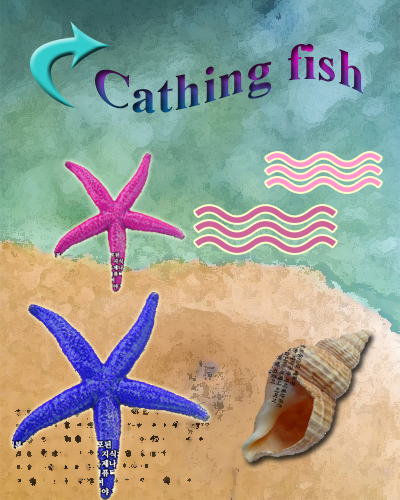
<style>
.page{position:relative;width:400px;height:500px}
.page>*{position:absolute;margin:0}
.t1{font:52.1px "TimesNewRomanPS-BoldMT"}
</style>
<div class="page">
<p class="t1" style="left:94px;top:43px;width:270px;height:71px">Cathing fish</p>
</div>
